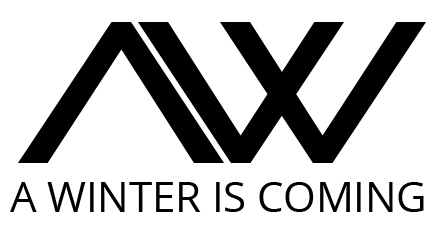
<style>
.page{position:relative;width:448px;height:240px;background:#ffffff}
.page>*{position:absolute;margin:0}
.t1{font:200px "PirulenRg-Regular";color:#000000}
.t2{font:41.7px "OpenSans";color:#000000}
</style>
<div class="page">
<p class="t1" style="left:18px;top:22px;width:206px;height:141px">A</p>
<p class="t2" style="left:10px;top:182px;width:414px;height:30px">A WINTER IS COMING</p>
</div>
